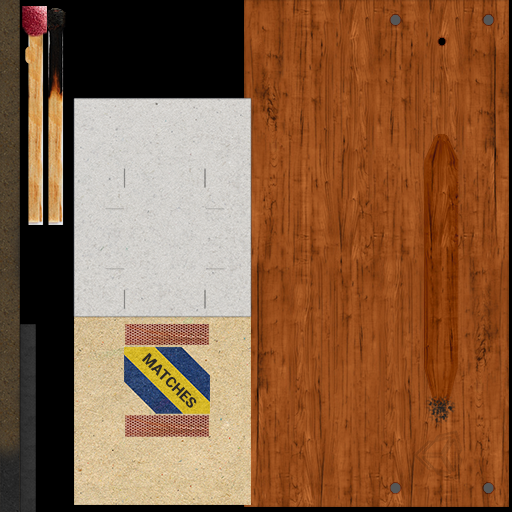
<style>
.page{position:relative;width:512px;height:512px}
.page>*{position:absolute;margin:0}
.t1{font:15px "Roboto-Black";color:#292727}
</style>
<div class="page">
<p class="t1" style="left:141px;top:352px;width:56px;height:56px;rotate:45deg">MATCHES</p>
</div>
